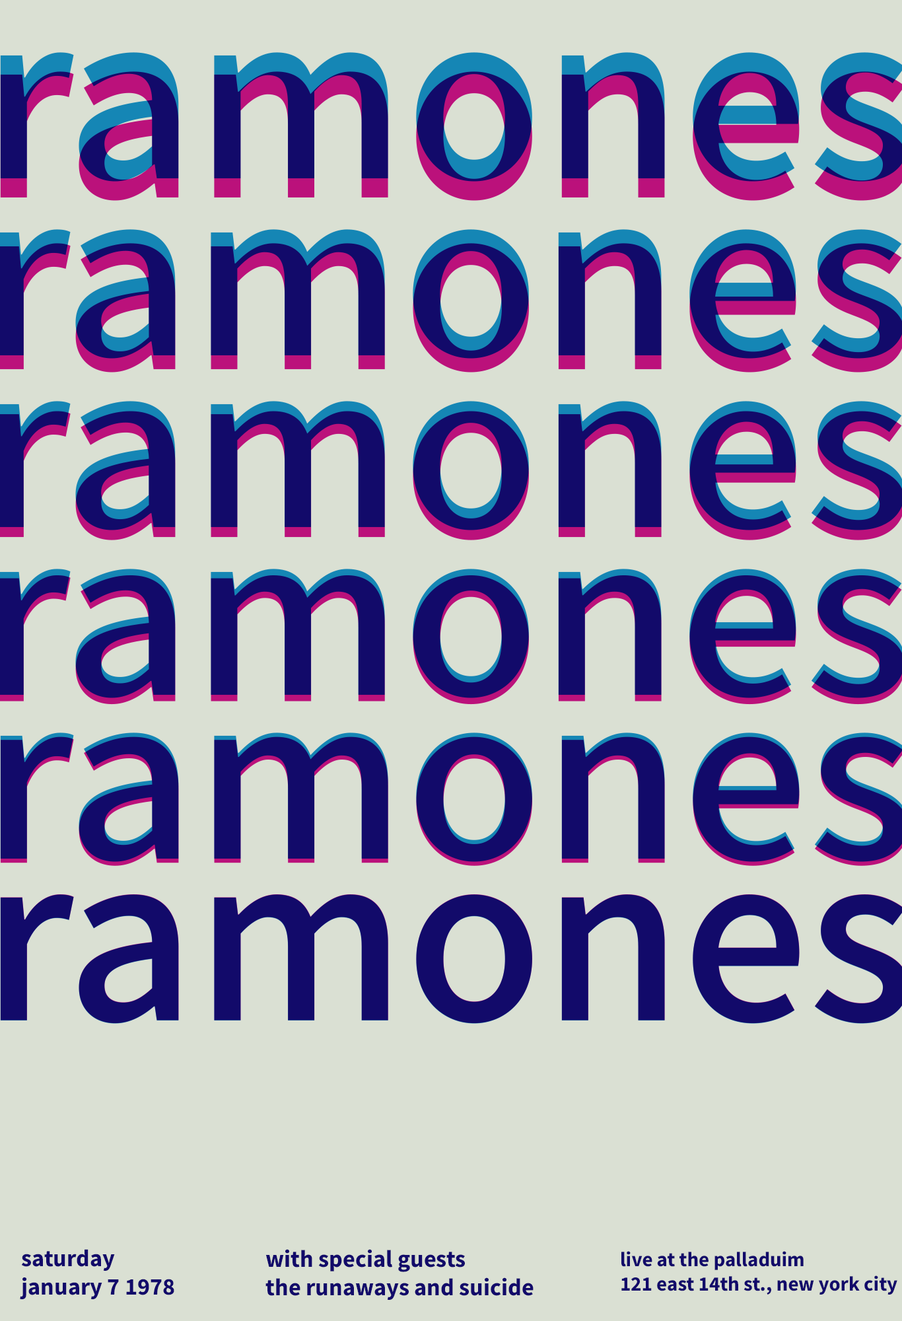
<style>
.page{position:relative;width:902px;height:1321px;background:#dae0d3}
.page>*{position:absolute;margin:0}
.t1{font:23.9px "SourceSansRoman-Bold";color:#120a6a}
.t2{font:24px "SourceSansRoman-Bold";color:#120a6a}
.t3{font:20.5px "SourceSansRoman-Bold";color:#120a6a}
</style>
<div class="page">
<p class="t1" style="left:20px;top:1249px;width:154px;height:51px">saturday<br>january 7 1978</p>
<p class="t2" style="left:266px;top:1249px;width:268px;height:51px">with special guests<br>the runaways and suicide</p>
<p class="t3" style="left:622px;top:1251px;width:276px;height:44px">live at the palladuim<br>121 east 14th st., new york city</p>
</div>
